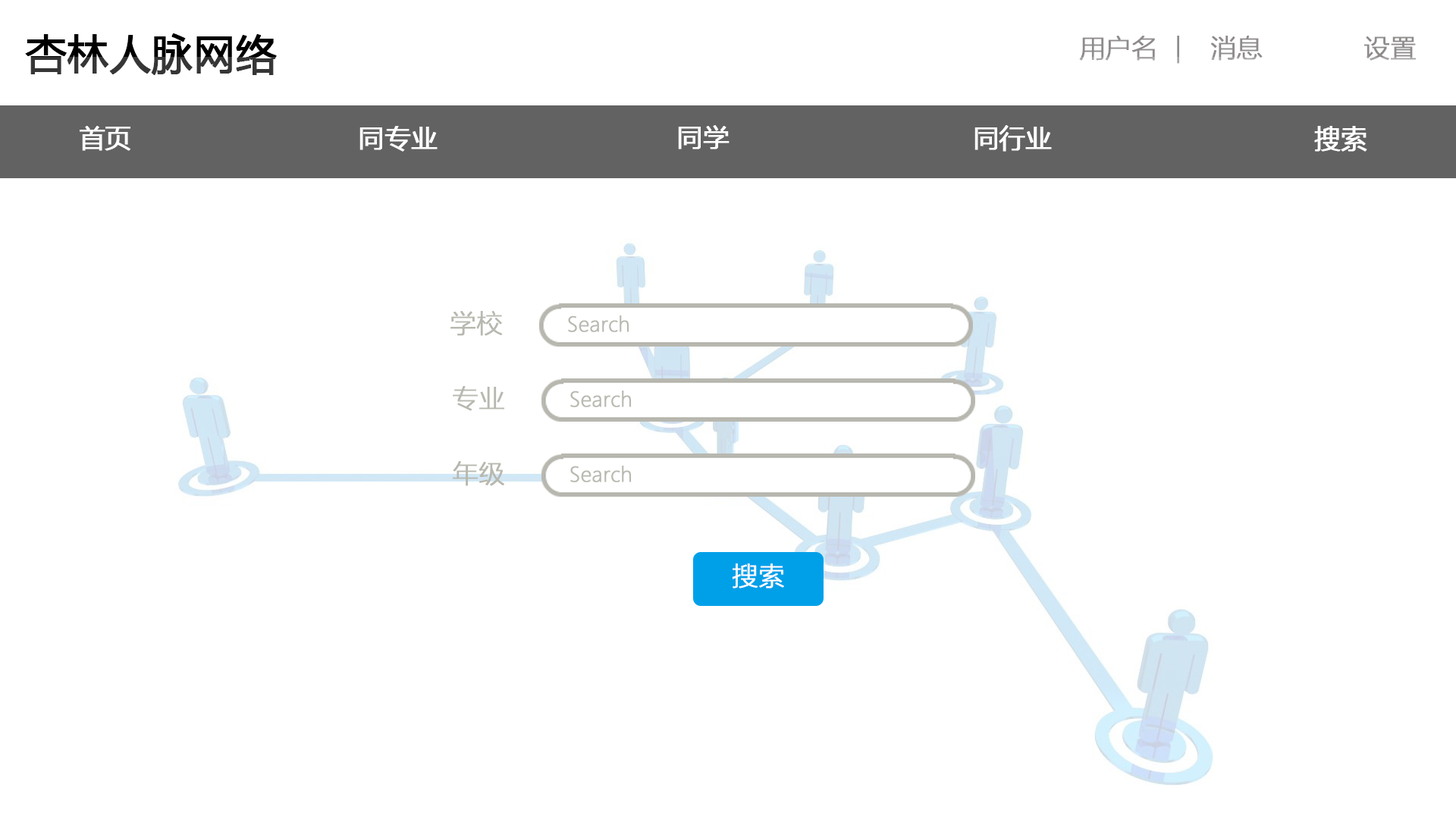
<style>
.page{position:relative;width:1456px;height:819px;background:#ffffff}
.page>*{position:absolute;margin:0}
.t1{font:40.9px "MicrosoftYaHei";font-weight:bold}
.t2{font:25.8px "MicrosoftYaHeiLight";color:#8f8b8b;font-weight:bold}
.t3{font:25.8px "MicrosoftYaHei";color:#ffffff;font-weight:bold}
.t4{font:25.8px "MicrosoftYaHeiLight";color:#b8b8b0;font-weight:bold}
.t5{font:19.9px "MicrosoftYaHeiLight";color:#b8b8b0;font-weight:bold}
.t6{font:25.8px "MicrosoftYaHeiLight";color:#ffffff;font-weight:bold}
</style>
<div class="page">
<p class="t1" style="left:25px;top:33px;width:252px;height:42px">杏林人脉网络</p>
<p class="t2" style="left:1079px;top:36px;width:100px;height:28px">用户名  |</p>
<p class="t2" style="left:1210px;top:36px;width:53px;height:25px">消息</p>
<p class="t2" style="left:1364px;top:36px;width:52px;height:25px">设置</p>
<p class="t3" style="left:80px;top:126px;width:50px;height:25px">首页</p>
<p class="t3" style="left:359px;top:126px;width:79px;height:26px">同专业</p>
<p class="t3" style="left:678px;top:125px;width:52px;height:24px">同学</p>
<p class="t3" style="left:974px;top:125px;width:78px;height:27px">同行业</p>
<p class="t3" style="left:1314px;top:126px;width:53px;height:26px">搜索</p>
<p class="t4" style="left:450px;top:311px;width:53px;height:25px">学校</p>
<p class="t5" style="left:568px;top:315px;width:61px;height:17px">Search</p>
<p class="t4" style="left:453px;top:386px;width:51px;height:25px">专业</p>
<p class="t5" style="left:570px;top:390px;width:62px;height:17px">Search</p>
<p class="t4" style="left:453px;top:461px;width:51px;height:25px">年级</p>
<p class="t5" style="left:570px;top:465px;width:62px;height:17px">Search</p>
<p class="t6" style="left:732px;top:563px;width:52px;height:25px">搜索</p>
</div>
